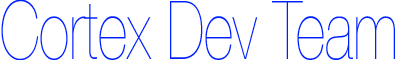
<style>
.page{position:relative;width:400px;height:60px;background:#ffffff}
.page>*{position:absolute;margin:0}
.t1{font:81.3px "HelveticaNeue-UltraLight";color:#0020ff;scale:0.71 1}
</style>
<div class="page">
<p class="t1" style="left:1px;top:0px;width:394px;height:61px">Cortex Dev Team</p>
</div>
